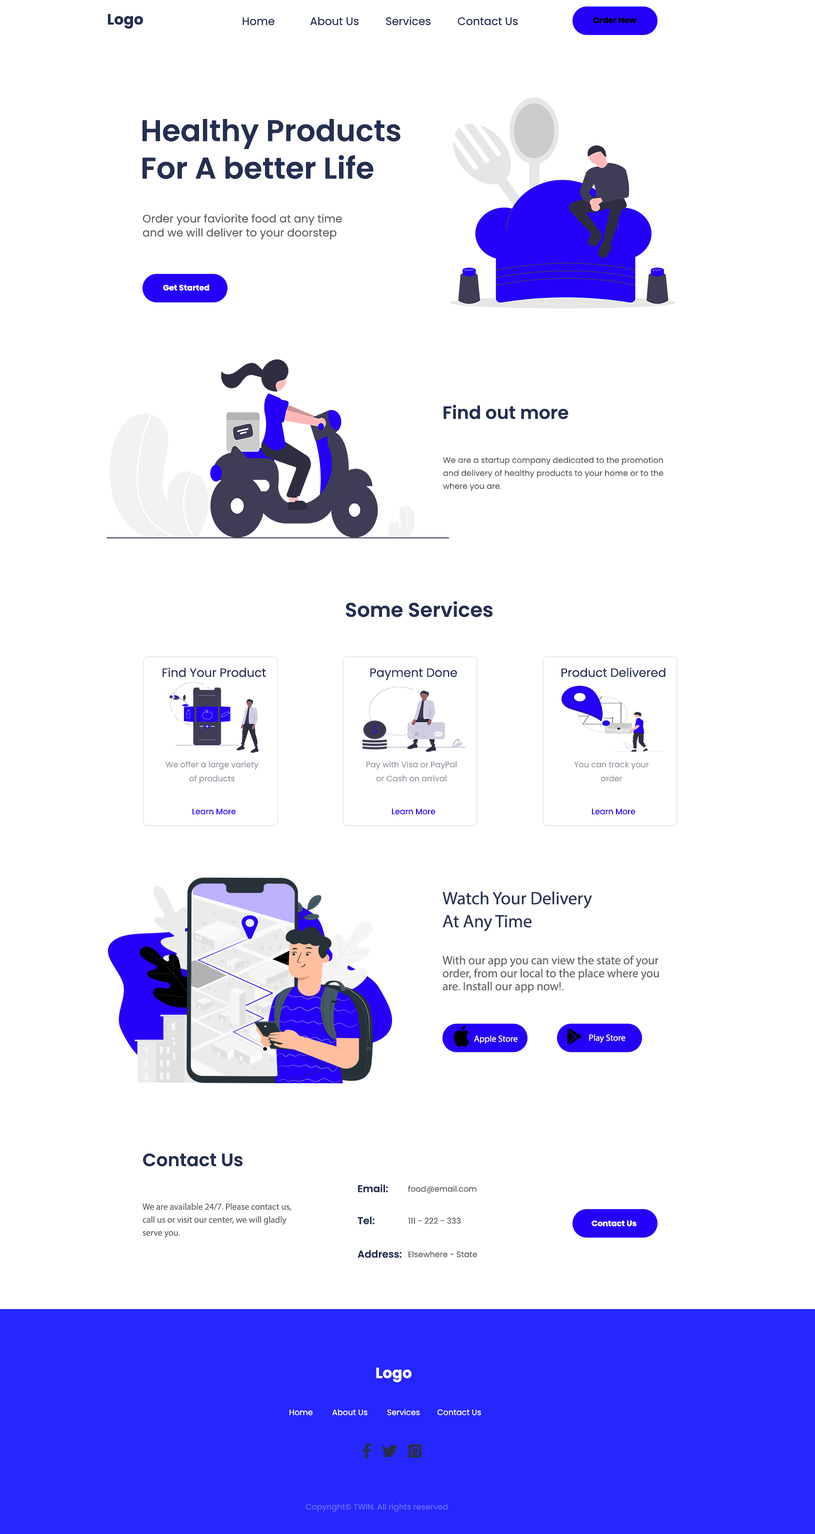
<style>
.page{position:relative;width:815px;height:1534px;background:#ffffff}
.page>*{position:absolute;margin:0}
.t1{font:15px "Poppins-Bold";color:#242f51}
.t2{font:11px "Poppins-Regular";color:#242f51}
.t3{font:8px "Poppins-Bold";color:#000000}
.t4{font:30px/37.5px "Poppins-SemiBold";color:#242f51}
.t5{font:11px/14px "Poppins-Regular";color:#616368}
.t6{font:8px "Poppins-Bold";color:#ffffff}
.t7{font:18px "Poppins-SemiBold";color:#242f51}
.t8{font:8px/13px "Poppins-Regular";color:#616368}
.t9{font:20px "Poppins-SemiBold";color:#242f51}
.t10{font:12px "Poppins-Regular";color:#242f51}
.t11{font:8px/14px "Poppins-Regular";color:#999ca5}
.t12{font:8px "Poppins-Regular";color:#2500f9}
.t13{font:18px/23px "Poppins-SemiBold";color:#242f51}
.t14{font:12px/13px "Poppins-Regular";color:#616368}
.t15{font:9px "Poppins-Bold";color:#ffffff}
.t16{font:10px "Poppins-SemiBold";color:#242f51}
.t17{font:8px "Poppins-Regular";color:#616368}
.t18{font:9px/13px "Poppins-Regular";color:#616368}
.t19{font:15px "Poppins-Bold";color:#ffffff}
.t20{font:8px "Poppins-Regular";color:#ffffff}
.t21{font:8px "Poppins-Regular";color:#6a6aff}
</style>
<div class="page">
<p class="t1" style="left:108px;top:14px;width:35px;height:15px">Logo</p>
<p class="t2" style="left:242px;top:16px;width:276px;height:10px">Home            About Us         Services         Contact Us</p>
<p class="t3" style="left:593px;top:17px;width:43px;height:7px">Order Now</p>
<p class="t4" style="left:142px;top:119px;width:258px;height:60px">Healthy Products<br>For A better Life</p>
<p class="t5" style="left:142px;top:214px;width:200px;height:26px">Order your faviorite food at any time<br>and we will deliver to your doorstep</p>
<p class="t6" style="left:163px;top:284px;width:47px;height:7px">Get Started</p>
<p class="t7" style="left:444px;top:404px;width:124px;height:16px">Find out more</p>
<p class="t8" style="left:443px;top:457px;width:221px;height:35px">We are a startup company dedicated to the promotion<br>and delivery of healthy products to your home or to the<br>where you are.</p>
<p class="t9" style="left:346px;top:601px;width:146px;height:17px">Some Services</p>
<p class="t10" style="left:162px;top:668px;width:104px;height:10px">Find Your Product</p>
<p class="t10" style="left:370px;top:668px;width:87px;height:12px">Payment Done</p>
<p class="t10" style="left:562px;top:668px;width:104px;height:10px">Product Delivered</p>
<p class="t11" style="left:166px;top:761px;width:92px;height:23px;text-align:center">We offer a large variety<br>of products</p>
<p class="t11" style="left:366px;top:762px;width:90px;height:20px;text-align:center">Pay with Visa or PayPal<br>or Cash on arrival</p>
<p class="t11" style="left:574px;top:762px;width:75px;height:20px;text-align:center">You can track your<br>order</p>
<p class="t12" style="left:192px;top:809px;width:44px;height:6px">Learn More</p>
<p class="t12" style="left:392px;top:809px;width:44px;height:6px">Learn More</p>
<p class="t12" style="left:592px;top:809px;width:44px;height:6px">Learn More</p>
<p class="t13" style="left:442px;top:892px;width:150px;height:40px">Watch Your Delivery<br>At Any Time</p>
<p class="t14" style="left:442px;top:956px;width:217px;height:37px">With our app you can view the state of your<br>order, from our local to the place where you <br>are. Install our app now!.</p>
<p class="t15" style="left:474px;top:1036px;width:44px;height:8px">Apple Store</p>
<p class="t15" style="left:589px;top:1034px;width:37px;height:10px">Play Store</p>
<p class="t7" style="left:143px;top:1154px;width:99px;height:13px">Contact Us</p>
<p class="t16" style="left:358px;top:1184px;width:30px;height:9px">Email:</p>
<p class="t17" style="left:408px;top:1186px;width:68px;height:8px">food@email.com</p>
<p class="t18" style="left:142px;top:1204px;width:150px;height:34px">We are available 24/7. Please contact us,<br>call us or visit our center, we will gladly<br>serve you.</p>
<p class="t16" style="left:358px;top:1217px;width:16px;height:8px">Tel:</p>
<p class="t17" style="left:408px;top:1218px;width:52px;height:6px">111 - 222 - 333</p>
<p class="t6" style="left:592px;top:1220px;width:44px;height:7px">Contact Us</p>
<p class="t16" style="left:358px;top:1250px;width:44px;height:8px">Address:</p>
<p class="t17" style="left:408px;top:1252px;width:69px;height:6px">Elsewhere - State</p>
<p class="t19" style="left:376px;top:1368px;width:36px;height:15px">Logo</p>
<p class="t20" style="left:290px;top:1410px;width:191px;height:6px">Home         About Us         Services        Contact Us</p>
<p class="t21" style="left:306px;top:1504px;width:142px;height:8px">Copyright© TWIN. All rights reserved</p>
</div>
